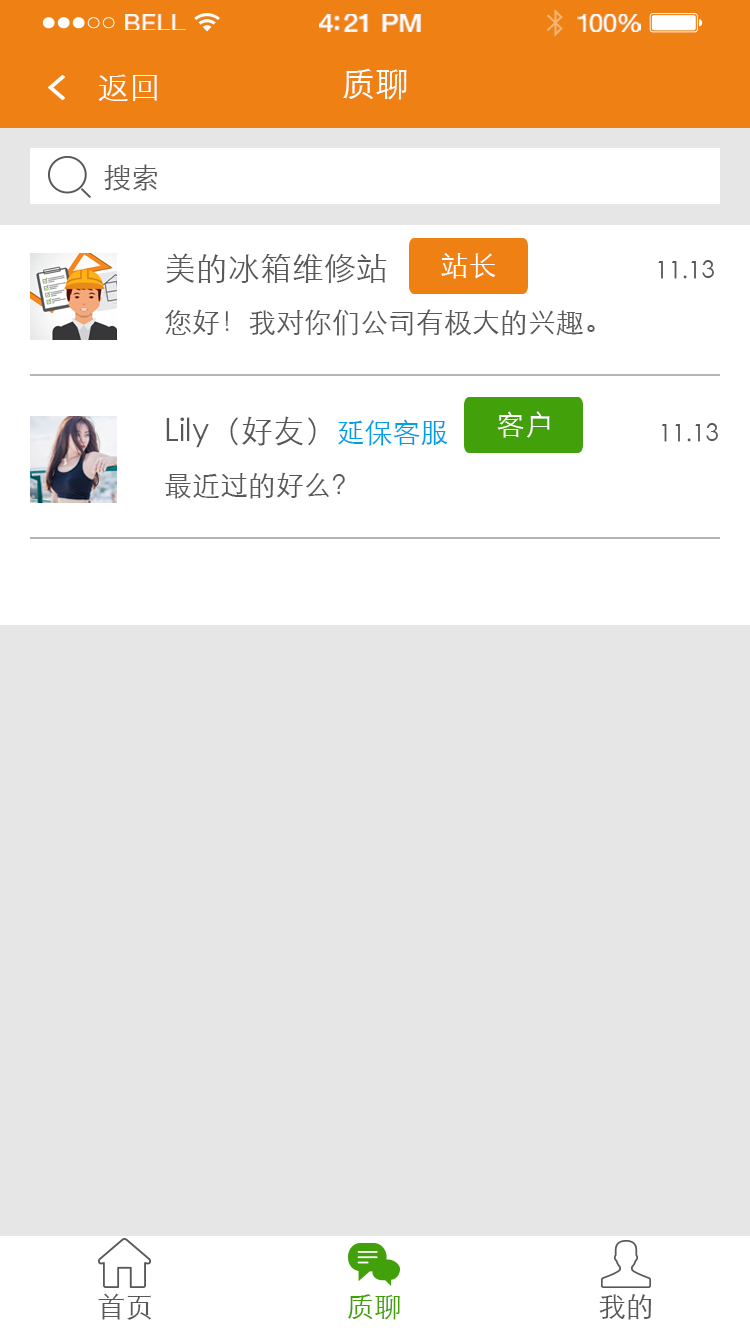
<style>
.page{position:relative;width:750px;height:1334px;background:#e6e6e6}
.page>*{position:absolute;margin:0}
.t1{font:23.3px "HelveticaNeue";letter-spacing:0.02em;color:#ffffff;scale:1.06 1}
.t2{font:25.3px "HelveticaNeue-Medium";letter-spacing:-0.02em;color:#ffffff;scale:1.06 1}
.t3{font:24.3px "HelveticaNeue";letter-spacing:-0.02em;color:#ffffff;scale:1.06 1}
.t4{font:32px "STXihei";color:#ffffff}
.t5{font:34px "STXihei";color:#ffffff}
.t6{font:28px "STXihei";color:#595757}
.t7{font:28px/56px "STXihei";color:#595757}
.t8{font:32px/56px "STXihei";color:#595757}
.t9{font:24px/56px "STXihei";color:#595757}
.t10{font:28px "STXihei";color:#ffffff}
.t11{font:28px/56px "STXihei";color:#009fe8}
.t12{font:28px "STXihei";color:#42a00a}
</style>
<div class="page">
<p class="t1" style="left:125px;top:14px;width:61px;height:16px">BELL</p>
<p class="t2" style="left:319px;top:14px;width:102px;height:18px">4:21 PM</p>
<p class="t3" style="left:577px;top:14px;width:64px;height:18px">100%</p>
<p class="t4" style="left:98px;top:74px;width:59px;height:27px">返回</p>
<p class="t5" style="left:343px;top:68px;width:64px;height:32px">质聊</p>
<p class="t6" style="left:104px;top:164px;width:53px;height:27px">搜索</p>
<p class="t7" style="left:165px;top:253px;width:549px;height:83px"><span class="t8">美的冰箱维修站                                     </span><span class="t9">11.13</span><br>您好！我对你们公司有极大的兴趣。</p>
<p class="t10" style="left:441px;top:253px;width:55px;height:26px">站长</p>
<p class="t10" style="left:497px;top:411px;width:53px;height:27px">客户</p>
<p class="t8" style="left:165px;top:416px;width:553px;height:83px">Lily（好友）<span class="t11">延保客服                              </span><span class="t9">11.13</span><span class="t7"><br>最近过的好么？</span></p>
<p class="t6" style="left:98px;top:1293px;width:53px;height:27px">首页</p>
<p class="t12" style="left:348px;top:1294px;width:52px;height:26px">质聊</p>
<p class="t6" style="left:599px;top:1294px;width:53px;height:26px">我的</p>
</div>
